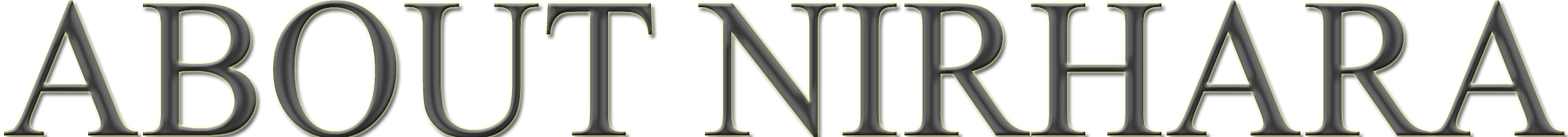
<style>
.page{position:relative;width:1568px;height:137px;background:#ffffff}
.page>*{position:absolute;margin:0}
.t1{font:198.5px "TimesNewRomanPSMT";scale:0.96 1}
</style>
<div class="page">
<p class="t1" style="left:4px;top:0px;width:1561px;height:138px">ABOUT NIRHARA</p>
</div>
